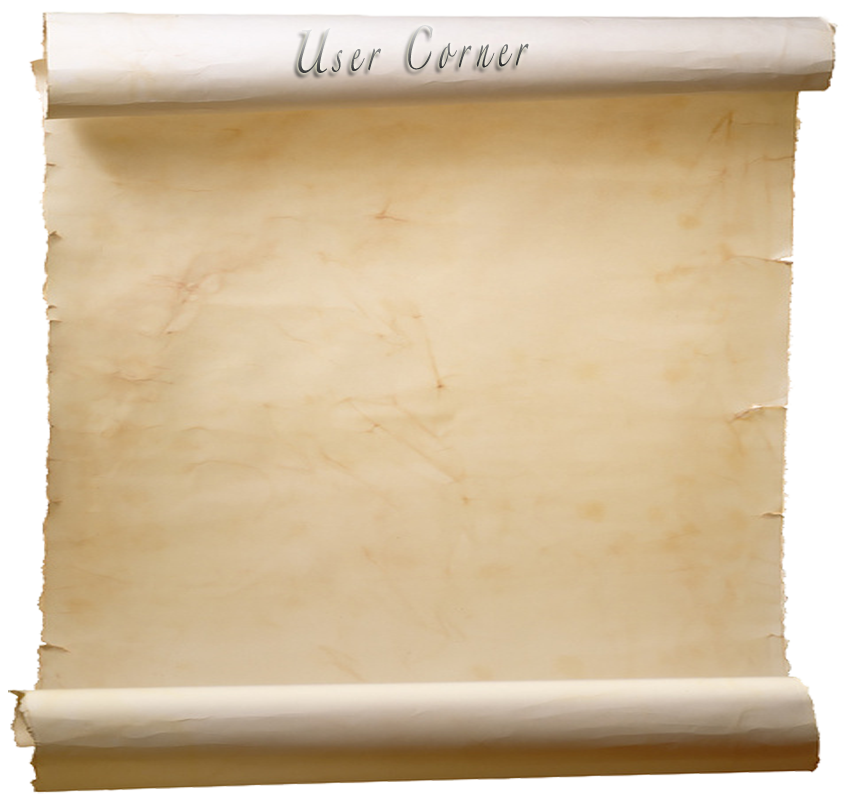
<style>
.page{position:relative;width:850px;height:800px}
.page>*{position:absolute;margin:0}
.t1{font:38.4px "Zapfino";letter-spacing:0.36em;scale:0.54 1}
</style>
<div class="page">
<p class="t1" style="left:298px;top:25px;width:231px;height:48px;rotate:-2deg">User Corner</p>
</div>
